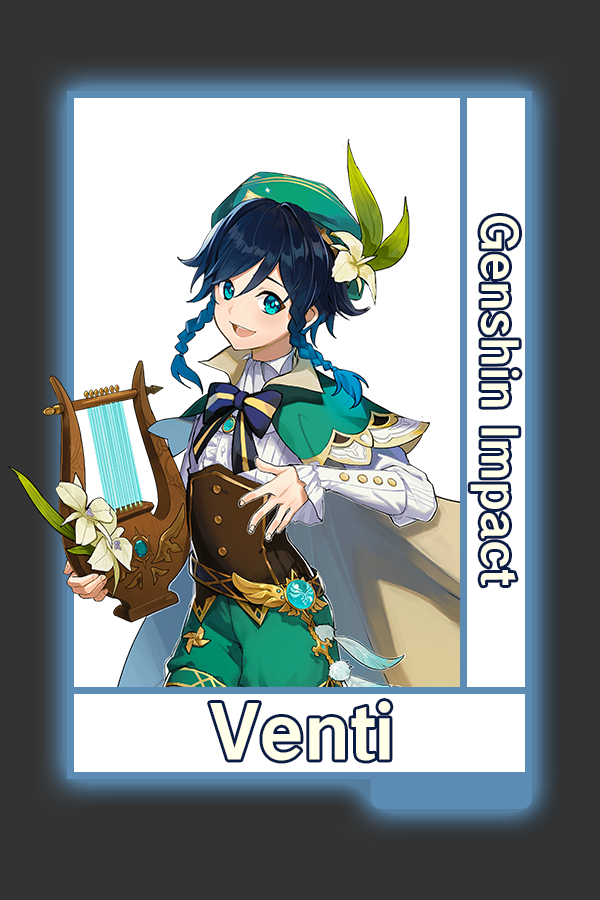
<style>
.page{position:relative;width:600px;height:900px;background:#ffffff}
.page>*{position:absolute;margin:0}
.t1{font:48.8px "HYWenHei-HEW";color:#fefef4}
.t2{font:75px "HYWenHei-HEW";color:#fefef4}
</style>
<div class="page">
<p class="t1" style="left:470px;top:216px;width:50px;height:370px;rotate:90deg">Genshin Impact</p>
<p class="t2" style="left:210px;top:701px;width:181px;height:60px">Venti</p>
</div>
